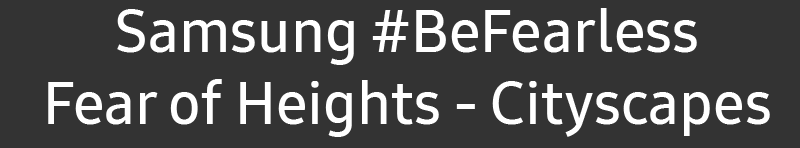
<style>
.page{position:relative;width:800px;height:148px;background:#333333}
.page>*{position:absolute;margin:0}
.t1{font:59.6px "SamsungOne-600";color:#ffffff}
</style>
<div class="page">
<p class="t1" style="left:48px;top:8px;width:722px;height:129px;text-align:center">Samsung #BeFearless<br>Fear of Heights - Cityscapes</p>
</div>
